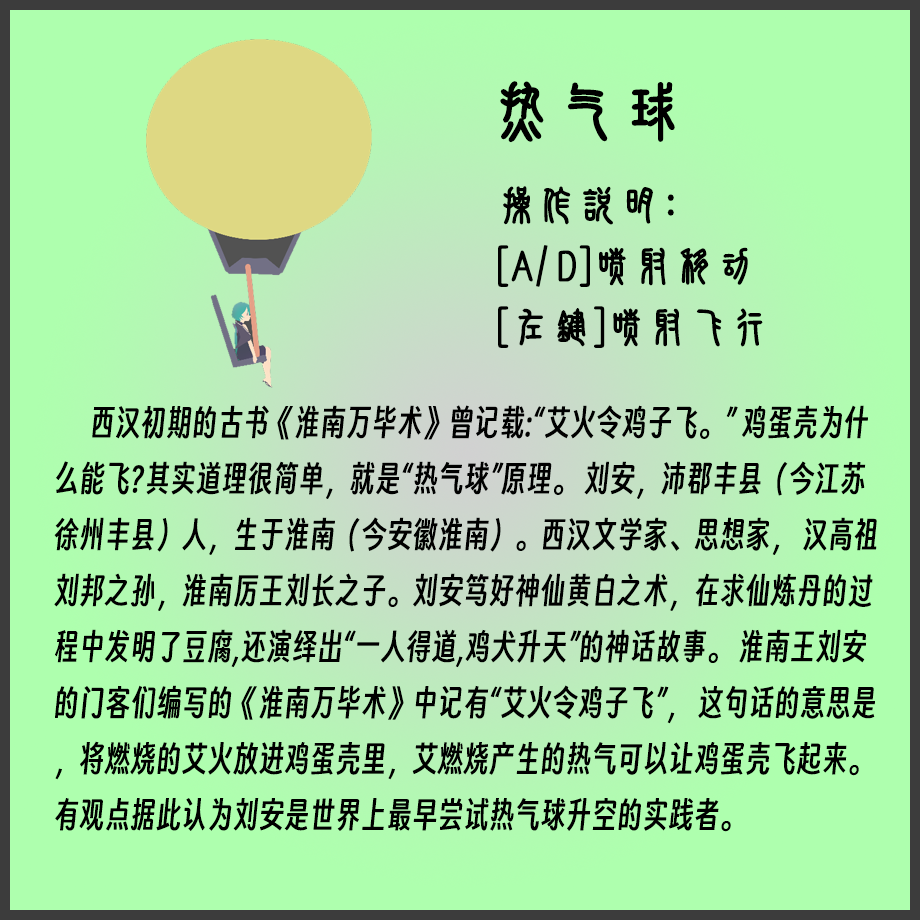
<style>
.page{position:relative;width:920px;height:920px;background:#aeffae}
.page>*{position:absolute;margin:0}
.t1{font:64px "SJxiaozhuanjian-Regular";color:#000000;font-weight:bold}
.t2{font:40px/61px "SJxiaozhuanjian-Regular";color:#000000;font-weight:bold}
.t3{font:33.3px "SmileySans-Oblique";color:#000000;scale:0.96 1}
</style>
<div class="page">
<p class="t1" style="left:500px;top:81px;width:175px;height:62px">热气球</p>
<p class="t2" style="left:498px;top:186px;width:265px;height:162px">操作说明：<br>[A/D]喷射移动<br>[左键]喷射飞行</p>
<p class="t3" style="left:54px;top:405px;width:823px;height:427px">西汉初期的古书《淮南万毕术》曾记载:“艾火令鸡子飞。” 鸡蛋壳为什么能飞?其实道理很简单，就是“热气球”原理。 刘安，沛郡丰县（今江苏徐州丰县）人，生于淮南（今安徽淮南）。西汉文学家、思想家， 汉高祖刘邦之孙，淮南厉王刘长之子。刘安笃好神仙黄白之术，在求仙炼丹的过程中发明了豆腐,还演绎出“一人得道,鸡犬升天”的神话故事。 淮南王刘安的门客们编写的《淮南万毕术》中记有“艾火令鸡子飞”， 这句话的意思是，将燃烧的艾火放进鸡蛋壳里，艾燃烧产生的热气可以让鸡蛋壳飞起来。有观点据此认为刘安是世界上最早尝试热气球升空的实践者。</p>
</div>
